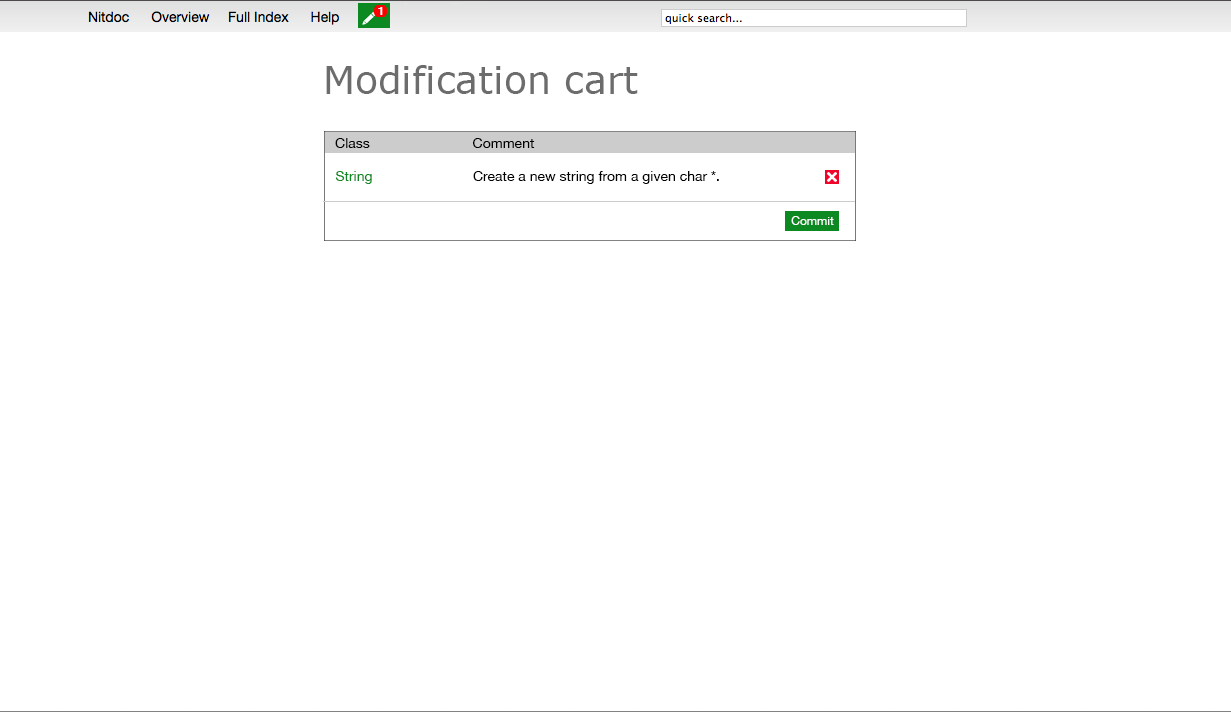
<style>
.page{position:relative;width:1231px;height:712px;background:#ffffff}
.page>*{position:absolute;margin:0}
.t1{font:12px "HelveticaNeue-Bold";color:#ffffff}
.t2{font:38px "Verdana";color:#6c6c6c}
.t3{font:14px "HelveticaNeue";color:#000000}
.t4{font:14px "HelveticaNeue";color:#0d8921}
.t5{font:12px "HelveticaNeue";color:#ffffff}
</style>
<div class="page">
<p class="t1" style="left:378px;top:7px;width:5px;height:8px">1</p>
<p class="t2" style="left:326px;top:65px;width:312px;height:29px">Modification cart</p>
<p class="t3" style="left:335px;top:138px;width:35px;height:10px">Class</p>
<p class="t3" style="left:473px;top:138px;width:62px;height:10px">Comment</p>
<p class="t4" style="left:335px;top:171px;width:37px;height:13px">String</p>
<p class="t3" style="left:473px;top:171px;width:246px;height:13px">Create a new string from a given char *.</p>
<p class="t5" style="left:791px;top:216px;width:43px;height:9px">Commit</p>
</div>
